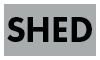
<style>
.page{position:relative;width:100px;height:60px;background:#a9acad}
.page>*{position:absolute;margin:0}
.t1{font:36px "FuturaPT-Heavy";color:#000000}
</style>
<div class="page">
<p class="t1" style="left:7px;top:17px;width:85px;height:25px">SHED</p>
</div>
